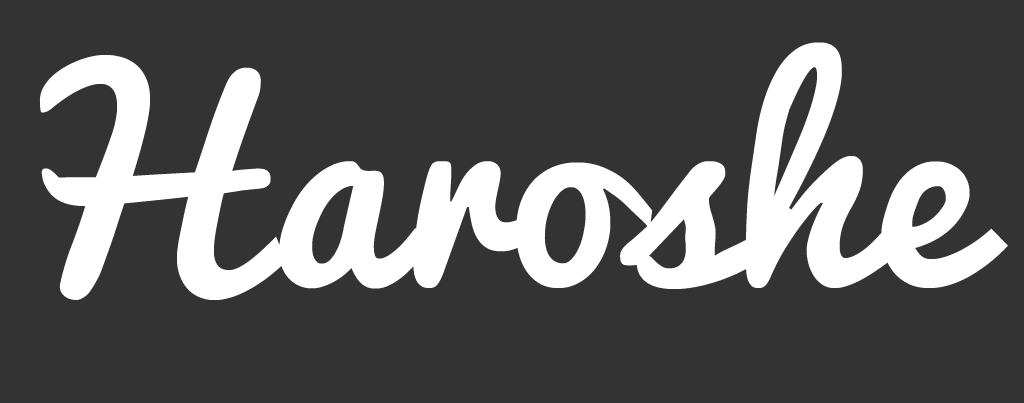
<style>
.page{position:relative;width:1024px;height:403px;background:#333333}
.page>*{position:absolute;margin:0}
.t1{font:261.9px "Pacifico";letter-spacing:0.005em;color:#ffffff}
</style>
<div class="page">
<p class="t1" style="left:39px;top:42px;width:969px;height:258px">Haroshe</p>
</div>
